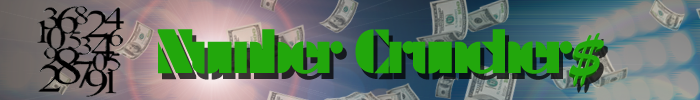
<style>
.page{position:relative;width:700px;height:100px}
.page>*{position:absolute;margin:0}
.t1{font:66.7px "Futura_Poster-Light";letter-spacing:-0.075em;color:#22a70c}
</style>
<div class="page">
<p class="t1" style="left:157px;top:29px;width:416px;height:45px">Number Cruncher</p>
</div>
